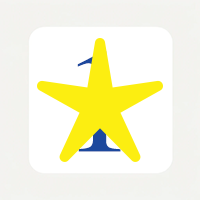
<style>
.page{position:relative;width:200px;height:200px;background:#ffffff}
.page>*{position:absolute;margin:0}
.t1{font:150px "Times-Roman";letter-spacing:-0.025em;color:#fcee11}
</style>
<div class="page">
<p class="t1" style="left:77px;top:50px;width:44px;height:102px">1</p>
</div>
